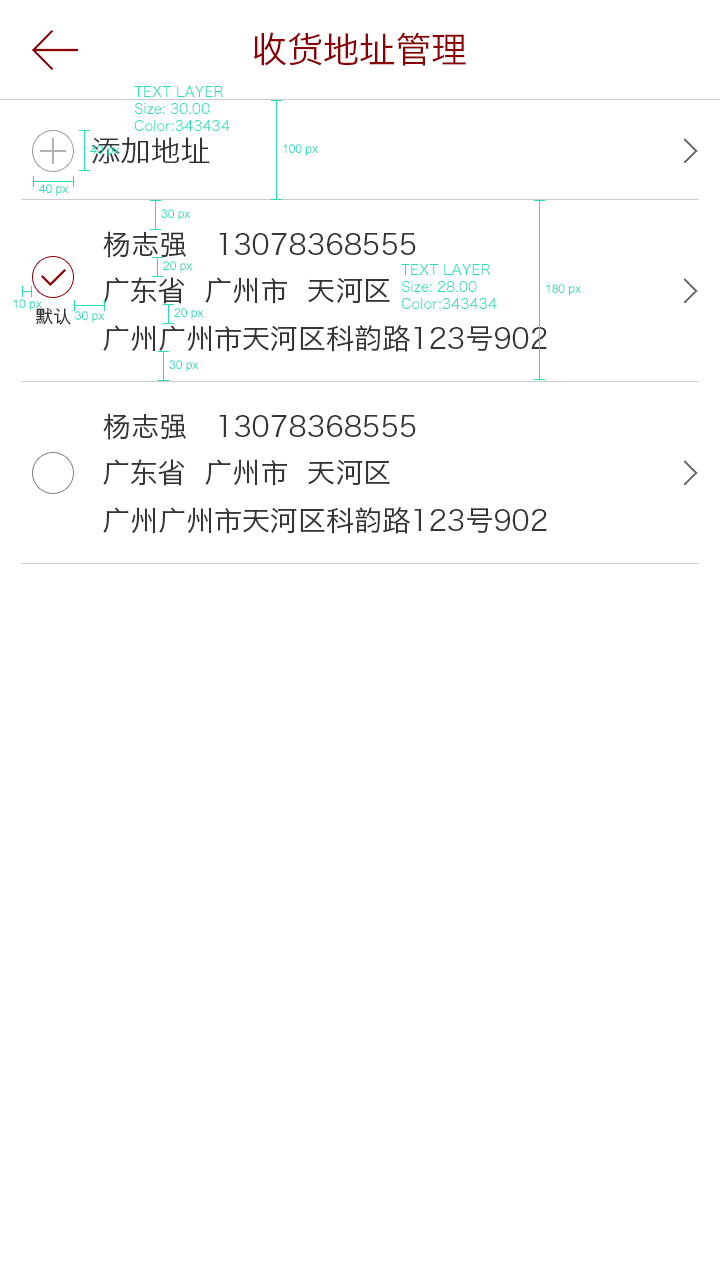
<style>
.page{position:relative;width:720px;height:1280px;background:#ffffff}
.page>*{position:absolute;margin:0}
.t1{font:36px "HiraginoSansGB-W3";color:#8a0105}
.t2{font:14px "HiraginoSansGB-W3";color:#28ddb9}
.t3{font:30px "HiraginoSansGB-W3";color:#343434}
.t4{font:12px "ArialMT";color:#28ddb9}
.t5{font:28px "HiraginoSansGB-W3";color:#343434}
.t6{font:18px "HiraginoSansGB-W3";color:#343434}
</style>
<div class="page">
<p class="t1" style="left:253px;top:32px;width:213px;height:34px">收货地址管理</p>
<p class="t2" style="left:134px;top:86px;width:96px;height:45px">TEXT LAYER<br>Size: 30.00<br>Color:343434</p>
<p class="t3" style="left:92px;top:137px;width:118px;height:27px">添加地址</p>
<p class="t4" style="left:90px;top:145px;width:30px;height:12px">40 px</p>
<p class="t4" style="left:283px;top:144px;width:35px;height:12px">100 px</p>
<p class="t4" style="left:39px;top:184px;width:30px;height:12px">40 px</p>
<p class="t4" style="left:161px;top:209px;width:30px;height:12px">30 px</p>
<p class="t5" style="left:103px;top:231px;width:313px;height:27px">杨志强   13078368555</p>
<p class="t4" style="left:163px;top:261px;width:30px;height:12px">20 px</p>
<p class="t2" style="left:401px;top:264px;width:96px;height:45px">TEXT LAYER<br>Size: 28.00<br>Color:343434</p>
<p class="t5" style="left:103px;top:277px;width:287px;height:27px">广东省  广州市  天河区</p>
<p class="t4" style="left:546px;top:284px;width:35px;height:12px">180 px</p>
<p class="t4" style="left:13px;top:299px;width:29px;height:12px">10 px</p>
<p class="t6" style="left:36px;top:308px;width:35px;height:17px">默认</p>
<p class="t4" style="left:75px;top:311px;width:30px;height:12px">30 px</p>
<p class="t4" style="left:174px;top:308px;width:30px;height:12px">20 px</p>
<p class="t5" style="left:103px;top:325px;width:444px;height:27px">广州广州市天河区科韵路123号902</p>
<p class="t4" style="left:169px;top:360px;width:30px;height:12px">30 px</p>
<p class="t5" style="left:103px;top:413px;width:313px;height:27px">杨志强   13078368555</p>
<p class="t5" style="left:103px;top:459px;width:287px;height:27px">广东省  广州市  天河区</p>
<p class="t5" style="left:103px;top:507px;width:444px;height:27px">广州广州市天河区科韵路123号902</p>
</div>
